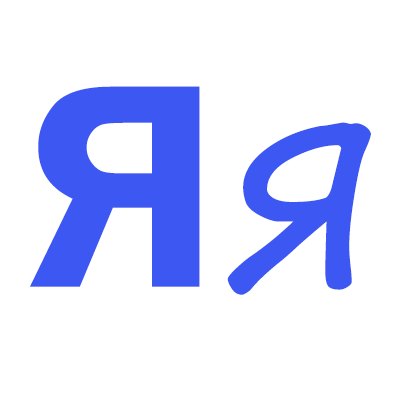
<style>
.page{position:relative;width:400px;height:400px;background:#ffffff}
.page>*{position:absolute;margin:0}
.t1{font:300px "FranklinGothic-Demi";color:#3d58f2}
.t2{font:300px "SegoePrint";color:#3d58f2}
</style>
<div class="page">
<p class="t1" style="left:30px;top:86px;width:341px;height:209px">Я<span class="t2">я</span></p>
</div>
